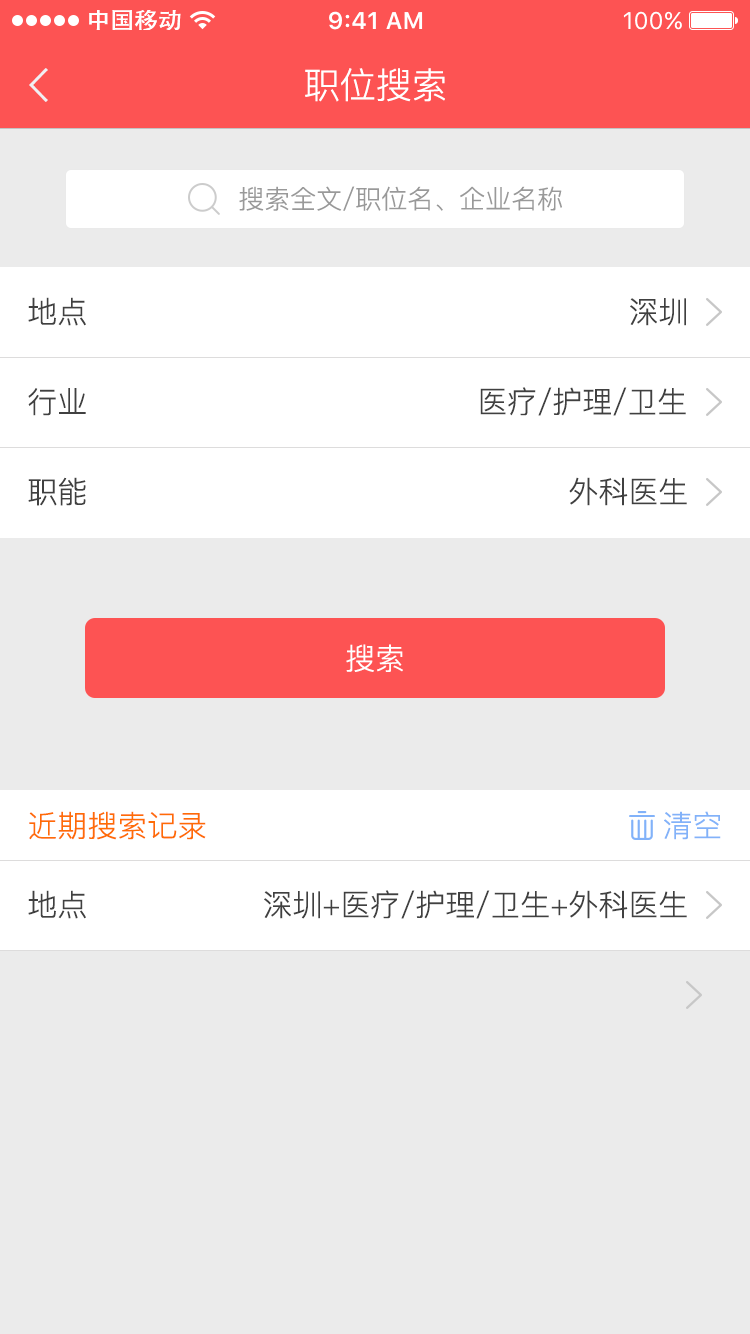
<style>
.page{position:relative;width:750px;height:1334px;background:#ebebeb}
.page>*{position:absolute;margin:0}
.t1{font:36px "PingFang-SC-Regular";color:#ffffff}
.t2{font:26px "PingFang-SC-Regular";color:#999999}
.t3{font:30px "PingFang-SC-Regular";color:#404040}
.t4{font:30px "PingFang-SC-Regular";color:#ffffff}
.t5{font:30px "PingFang-SC-Regular";color:#ff6c05}
.t6{font:30px "PingFang-SC-Regular";color:#82b2f9}
</style>
<div class="page">
<p class="t1" style="left:305px;top:68px;width:140px;height:34px">职位搜索</p>
<p class="t2" style="left:239px;top:186px;width:323px;height:25px">搜索全文/职位名、企业名称</p>
<p class="t3" style="left:28px;top:297px;width:58px;height:29px">地点</p>
<p class="t3" style="left:630px;top:298px;width:56px;height:28px">深圳</p>
<p class="t3" style="left:28px;top:388px;width:58px;height:28px">行业</p>
<p class="t3" style="left:480px;top:387px;width:206px;height:29px">医疗/护理/卫生</p>
<p class="t3" style="left:28px;top:477px;width:58px;height:29px">职能</p>
<p class="t3" style="left:569px;top:477px;width:118px;height:29px">外科医生</p>
<p class="t4" style="left:346px;top:644px;width:57px;height:28px">搜索</p>
<p class="t5" style="left:29px;top:811px;width:177px;height:29px">近期搜索记录</p>
<p class="t6" style="left:664px;top:811px;width:57px;height:29px">清空</p>
<p class="t3" style="left:28px;top:890px;width:58px;height:29px">地点</p>
<p class="t3" style="left:264px;top:890px;width:423px;height:29px">深圳+医疗/护理/卫生+外科医生</p>
</div>
